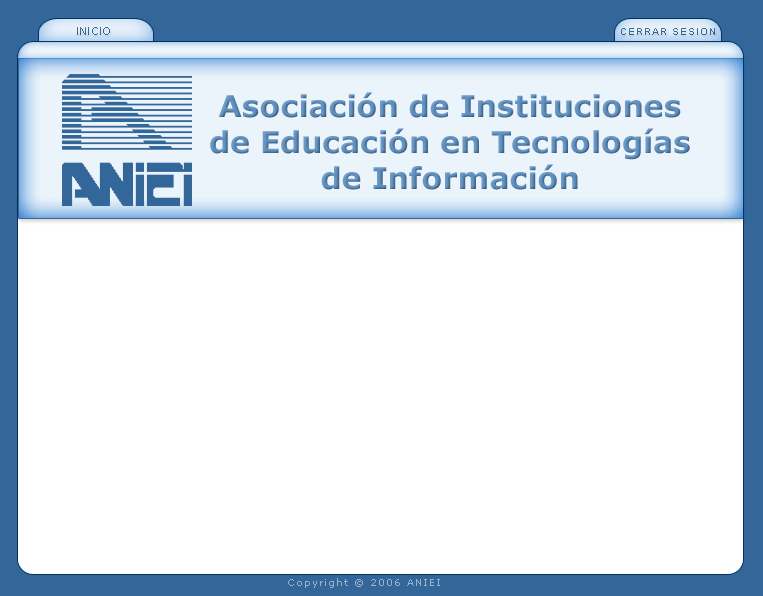
<style>
.page{position:relative;width:763px;height:596px;background:#ffffff}
.page>*{position:absolute;margin:0}
.t1{font:11px "ArialMT";letter-spacing:0.1em;color:#336699;text-transform:uppercase}
.t2{font:10px "ArialMT";letter-spacing:0.1em;color:#336699;text-transform:uppercase}
.t3{font:30px "Verdana-Bold";color:#5e8fbf}
.t4{font:10px "Verdana";letter-spacing:0.1em;color:#99b3cc}
</style>
<div class="page">
<p class="t1" style="left:77px;top:27px;width:33px;height:8px">INIcIO</p>
<p class="t2" style="left:621px;top:28px;width:94px;height:7px">cERRAR SESION</p>
<p class="t3" style="left:210px;top:92px;width:480px;height:98px;text-align:center">Asociación de Instituciones<br>de Educación en Tecnologías<br>de Información</p>
<p class="t4" style="left:288px;top:578px;width:152px;height:10px">Copyright © 2006 ANIEI</p>
</div>
